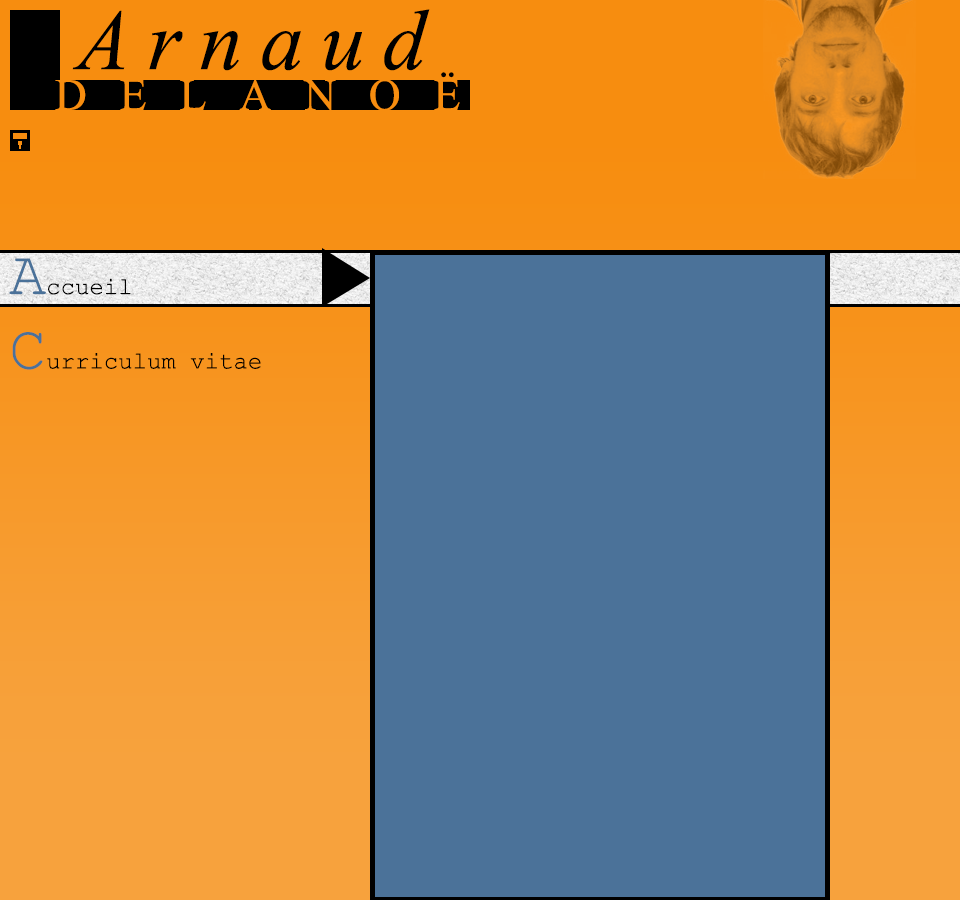
<style>
.page{position:relative;width:960px;height:900px;background:#4b7299}
.page>*{position:absolute;margin:0}
.t1{font:86px "TimesNewRomanPS-ItalicMT";color:#000000}
.t2{font:45px "TimesNewRomanPSMT";color:#f78d0f}
.t3{font:24px "CourierNewPSMT";color:#000000}
.t4{font:62px "CourierNewPSMT";color:#4b7299}
</style>
<div class="page">
<p class="t1" style="left:72px;top:9px;width:358px;height:62px">Arnaud</p>
<p class="t2" style="left:434px;top:72px;width:27px;height:38px">Ë</p>
<p class="t2" style="left:55px;top:79px;width:405px;height:32px">DELANOE</p>
<p class="t3" style="left:9px;top:258px;width:252px;height:112px"><span class="t4">A</span>ccueil<br><span class="t4">C</span>urriculum vitae</p>
</div>
